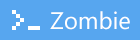
<style>
.page{position:relative;width:140px;height:40px;background:#57a6ef}
.page>*{position:absolute;margin:0}
.t1{font:24px "SegoeUISymbol";color:#ffffff}
</style>
<div class="page">
<p class="t1" style="left:50px;top:11px;width:80px;height:19px">Zombie</p>
</div>
